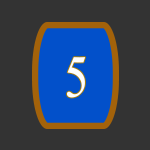
<style>
.page{position:relative;width:150px;height:150px;background:#333333}
.page>*{position:absolute;margin:0}
.t1{font:62.5px "TimesNewRomanPSMT";letter-spacing:0.1em;color:#ffffff;scale:0.75 1}
</style>
<div class="page">
<p class="t1" style="left:67px;top:57px;width:19px;height:41px">5</p>
</div>
